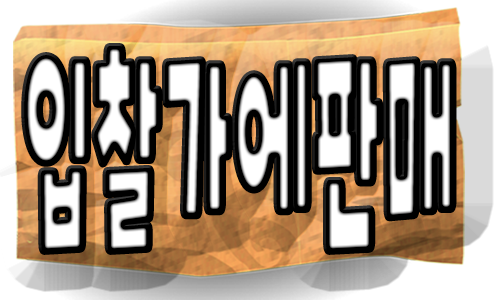
<style>
.page{position:relative;width:500px;height:300px;background:#ffffff}
.page>*{position:absolute;margin:0}
.t1{font:204.8px "CookieRunOTF-Black";scale:0.36 1}
</style>
<div class="page">
<p class="t1" style="left:24px;top:46px;width:430px;height:206px">입찰가에판매</p>
</div>
